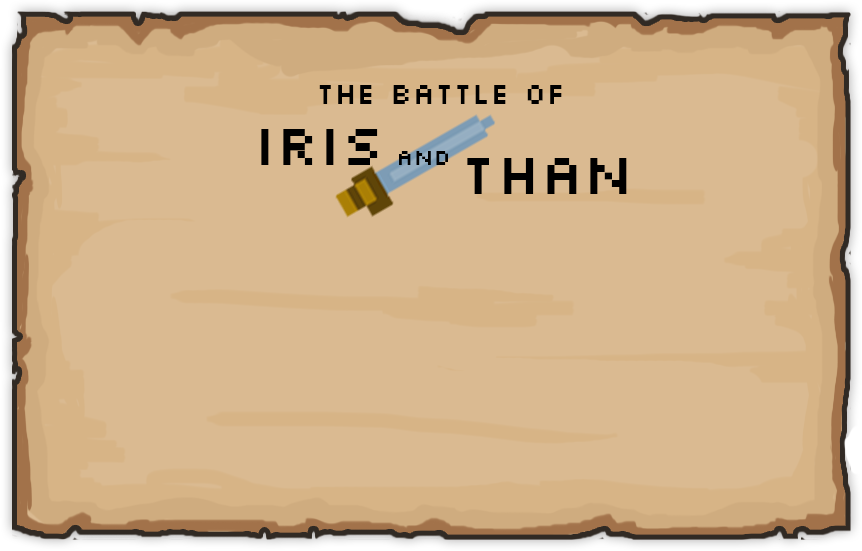
<style>
.page{position:relative;width:862px;height:551px;background:#daba91}
.page>*{position:absolute;margin:0}
.t1{font:31.2px "Silkscreen";color:#000000}
.t2{font:60.8px "Silkscreen";color:#000000}
.t3{font:24.3px "Silkscreen";color:#000000}
</style>
<div class="page">
<p class="t1" style="left:319px;top:85px;width:243px;height:19px">The Battle of</p>
<p class="t2" style="left:261px;top:129px;width:117px;height:36px">Iris</p>
<p class="t3" style="left:399px;top:151px;width:49px;height:14px">AND</p>
<p class="t2" style="left:467px;top:158px;width:160px;height:36px">Than</p>
</div>
